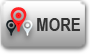
<style>
.page{position:relative;width:90px;height:54px}
.page>*{position:absolute;margin:0}
.t1{font:18px "ArialNarrow-Bold";color:#333333}
</style>
<div class="page">
<p class="t1" style="left:37px;top:18px;width:43px;height:13px">MORE</p>
</div>
